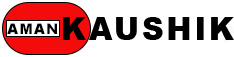
<style>
.page{position:relative;width:234px;height:57px;background:#ffffff}
.page>*{position:absolute;margin:0}
.t1{font:30.9px "Arial-Black";letter-spacing:0.06em;color:#000000;text-transform:uppercase}
.t2{font:14.4px "Arial-Black";letter-spacing:0.06em;color:#000000;text-transform:uppercase}
</style>
<div class="page">
<p class="t1" style="left:63px;top:17px;width:171px;height:23px">KAUSHIK</p>
<p class="t2" style="left:7px;top:23px;width:50px;height:11px">AMAN</p>
</div>
